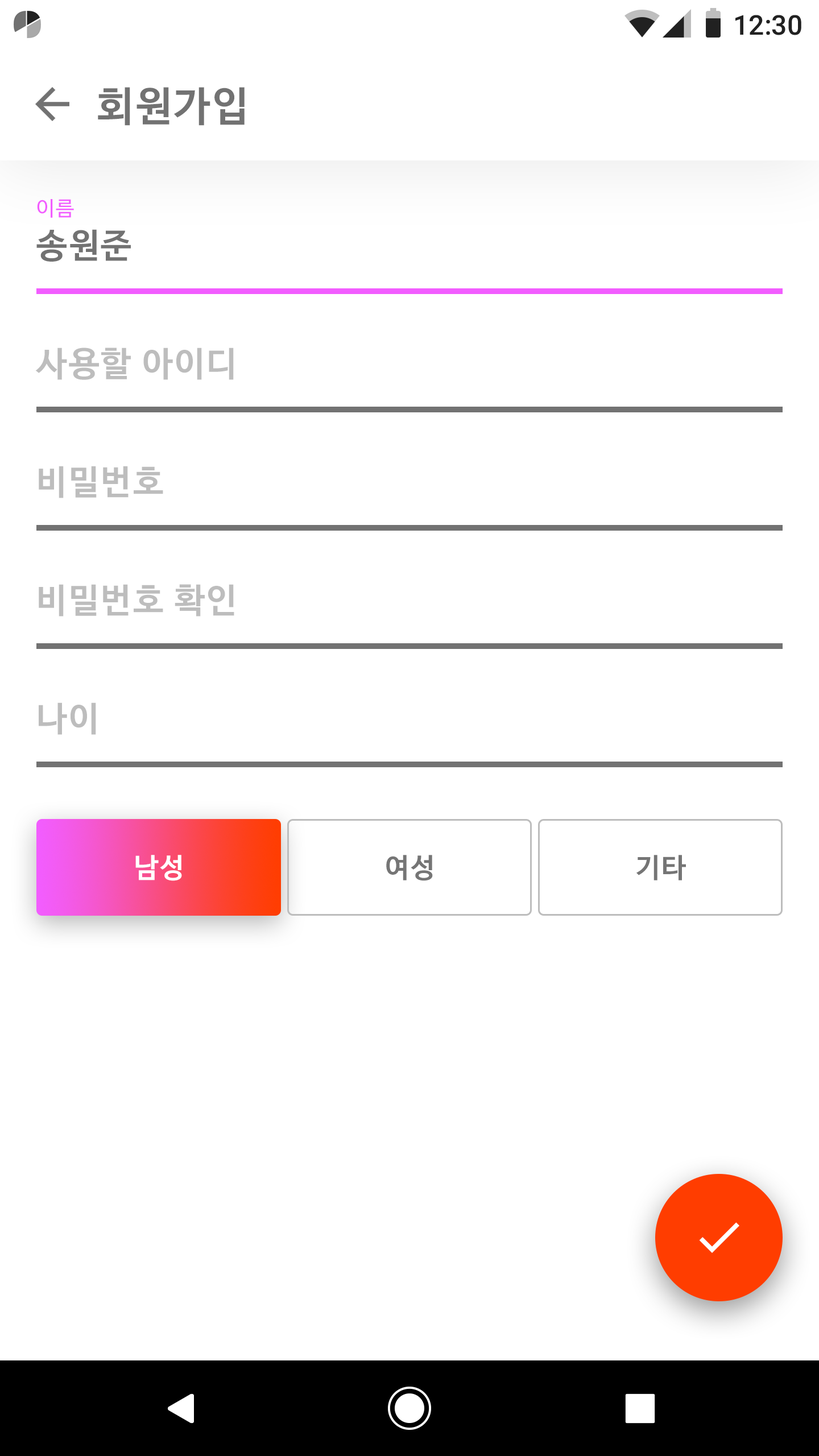
<style>
.page{position:relative;width:819px;height:1456px;background:#ffffff}
.page>*{position:absolute;margin:0}
.t1{font:27.3px "Roboto-Medium";color:#212121}
.t2{font:40.9px "NanumBarunGothicBold";letter-spacing:0.05em;color:#727272}
.t3{font:20.5px "NanumBarunGothic";letter-spacing:0.05em;color:#f25dff}
.t4{font:34.1px "NanumBarunGothicBold";letter-spacing:0.05em;color:#727272}
.t5{font:34.1px "NanumBarunGothicBold";letter-spacing:0.05em;color:#bdbdbd}
.t6{font:27.3px "NanumBarunGothicBold";letter-spacing:0.05em;color:#ffffff}
.t7{font:27.3px "NanumBarunGothicBold";letter-spacing:0.05em;color:#757575}
</style>
<div class="page">
<p class="t1" style="left:735px;top:15px;width:66px;height:20px">12:30</p>
<p class="t2" style="left:98px;top:87px;width:147px;height:39px">회원가입</p>
<p class="t3" style="left:37px;top:199px;width:37px;height:19px">이름</p>
<p class="t4" style="left:36px;top:229px;width:95px;height:33px">송원준</p>
<p class="t5" style="left:35px;top:348px;width:199px;height:32px">사용할 아이디</p>
<p class="t5" style="left:39px;top:466px;width:124px;height:32px">비밀번호</p>
<p class="t5" style="left:39px;top:584px;width:195px;height:33px">비밀번호 확인</p>
<p class="t5" style="left:39px;top:702px;width:57px;height:33px">나이</p>
<p class="t6" style="left:135px;top:855px;width:47px;height:26px">남성</p>
<p class="t7" style="left:386px;top:855px;width:47px;height:26px">여성</p>
<p class="t7" style="left:636px;top:855px;width:50px;height:25px">기타</p>
</div>
